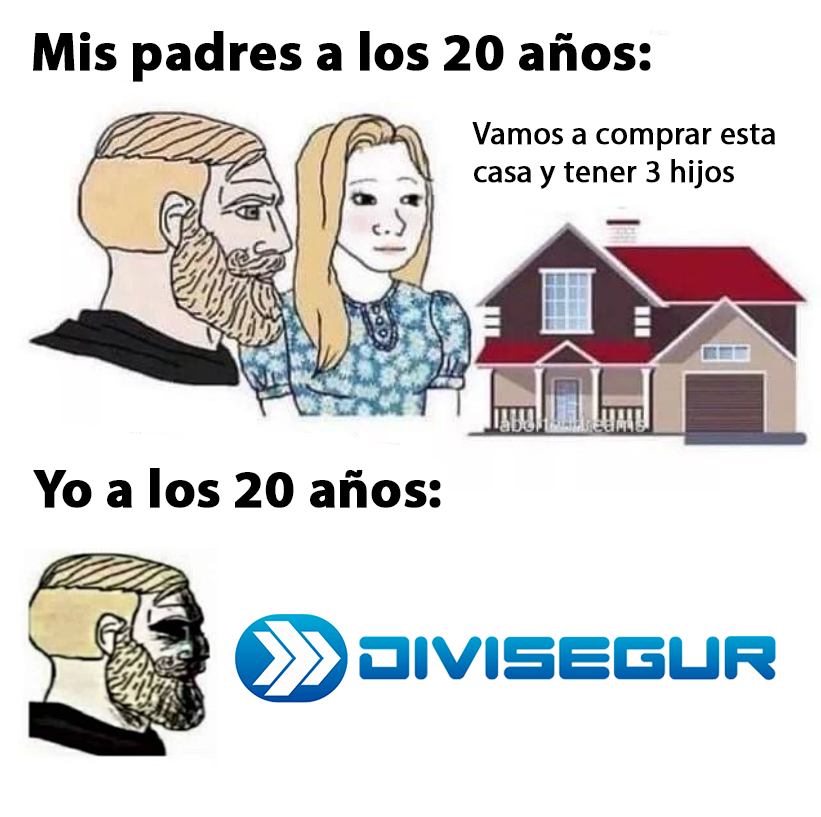
<style>
.page{position:relative;width:821px;height:817px;background:#ffffff}
.page>*{position:absolute;margin:0}
.t1{font:53.6px "MyriadPro-Bold";color:#000000;font-weight:bold}
.t2{font:31.4px "MyriadPro-Regular";color:#000000;font-weight:bold}
</style>
<div class="page">
<p class="t1" style="left:33px;top:31px;width:618px;height:51px">Mis padres a los 20 años:</p>
<p class="t2" style="left:472px;top:122px;width:303px;height:67px">Vamos a comprar esta<br>casa y tener 3 hijos</p>
<p class="t1" style="left:33px;top:468px;width:408px;height:40px">Yo a los 20 años:</p>
</div>
